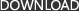
<style>
.page{position:relative;width:79px;height:11px;background:#333333}
.page>*{position:absolute;margin:0}
.t1{font:14px "SegoeUI";color:#ffffff}
</style>
<div class="page">
<p class="t1" style="left:0px;top:0px;width:79px;height:11px">DOWNLOAD</p>
</div>
